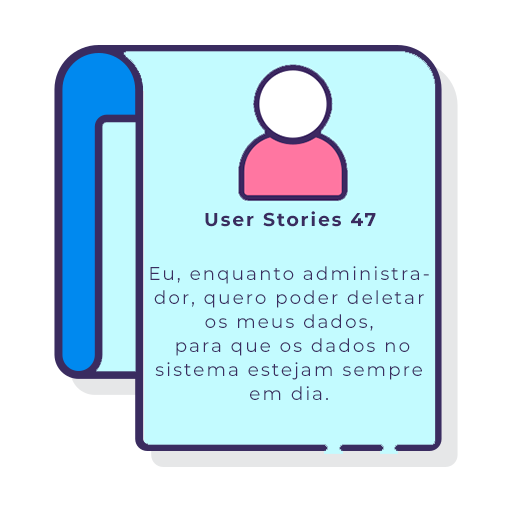
<style>
.page{position:relative;width:512px;height:512px;background:#ffffff}
.page>*{position:absolute;margin:0}
.t1{font:18.7px "Montserrat-Bold";letter-spacing:0.1em;color:#3a2c60}
.t2{font:18.7px/24px "Montserrat-Regular";letter-spacing:0.1em;color:#3a2c60}
</style>
<div class="page">
<p class="t1" style="left:205px;top:211px;width:171px;height:16px">User Stories 47</p>
<p class="t2" style="left:150px;top:266px;width:279px;height:134px;text-align:center">Eu, enquanto administra-<br>dor, quero poder deletar<br>os meus dados,<br> para que os dados no<br>sistema estejam sempre<br>em dia.</p>
</div>
